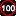
<style>
.page{position:relative;width:16px;height:16px;background:#000000}
.page>*{position:absolute;margin:0}
.t1{font:8px "ArialMT";color:#ffffff;font-weight:bold}
</style>
<div class="page">
<p class="t1" style="left:2px;top:5px;width:13px;height:7px">100</p>
</div>
